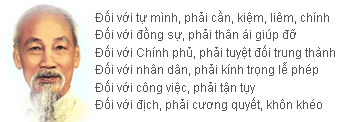
<style>
.page{position:relative;width:339px;height:122px;background:#ffffff}
.page>*{position:absolute;margin:0}
.t1{font:12px "ArialMT";color:#535453}
</style>
<div class="page">
<p class="t1" style="left:95px;top:10px;width:240px;height:101px">Đối với tự mình, phải cần, kiệm, liêm, chính<br>Đối với đồng sự, phải thân ái giúp đỡ<br>Đối với Chính phủ, phải tuyệt đối trung thành<br>Đối với nhân dân, phải kính trọng lễ phép<br>Đối với công việc, phải tận tụy<br>Đối với địch, phải cương quyết, khôn khéo</p>
</div>
